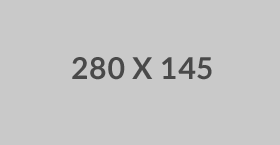
<style>
.page{position:relative;width:280px;height:145px;background:#c9c9c9}
.page>*{position:absolute;margin:0}
.t1{font:30px "Lato-Bold";letter-spacing:0.025em;color:#494949}
</style>
<div class="page">
<p class="t1" style="left:72px;top:57px;width:140px;height:23px">280 X 145</p>
</div>
